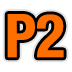
<style>
.page{position:relative;width:72px;height:72px;background:#ffffff}
.page>*{position:absolute;margin:0}
.t1{font:60px "HelveticaNeue-CondensedBold";color:#ff6f00}
</style>
<div class="page">
<p class="t1" style="left:7px;top:14px;width:57px;height:44px">P2</p>
</div>
